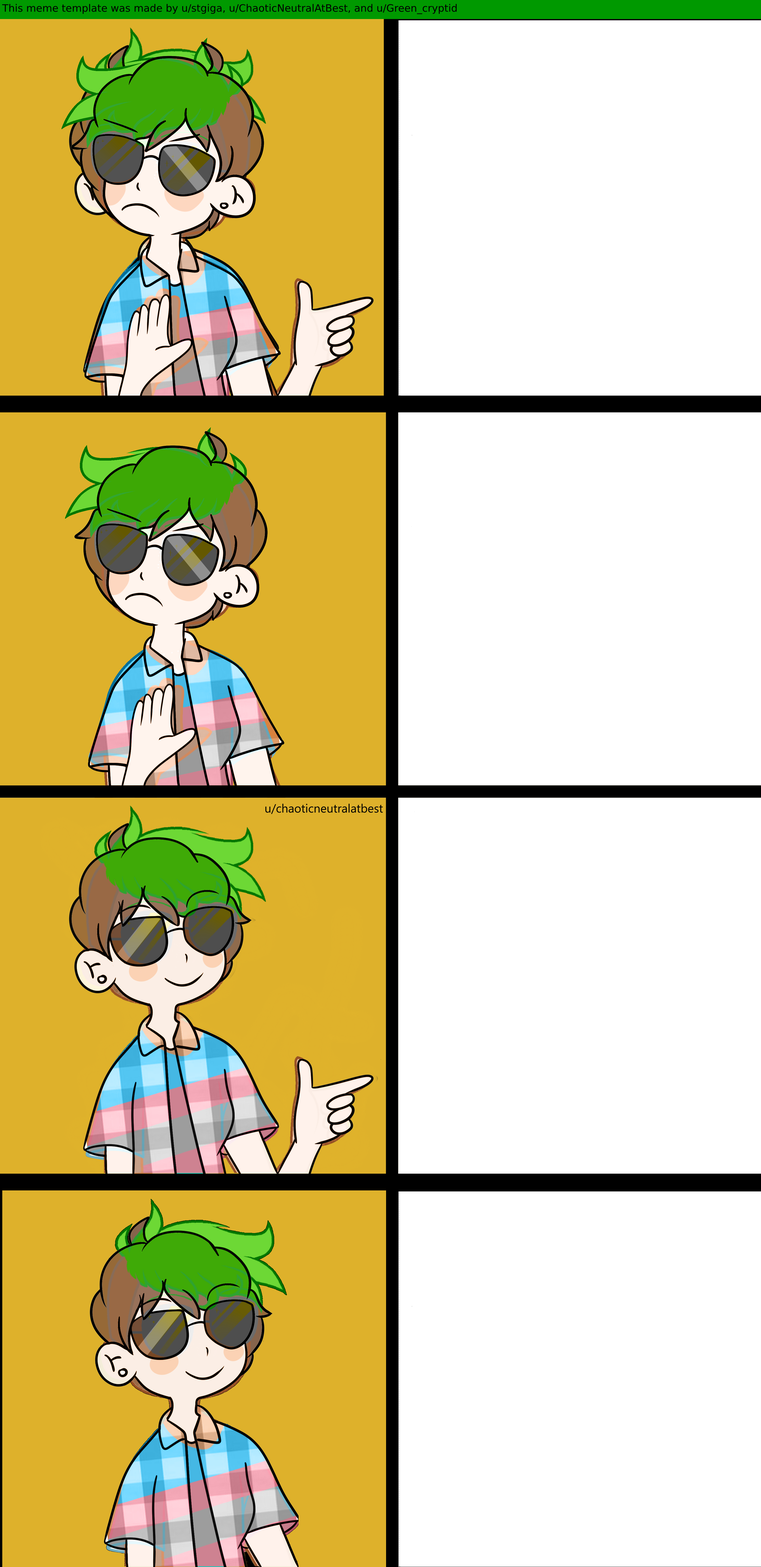
<style>
.page{position:relative;width:761px;height:1567px;background:#ffffff}
.page>*{position:absolute;margin:0}
.t1{font:10.1px "DejaVuSans";color:#000000}
</style>
<div class="page">
<p class="t1" style="left:2px;top:4px;width:455px;height:10px">This meme template was made by u/stgiga, u/ChaoticNeutralAtBest, and u/Green_cryptid</p>
</div>
